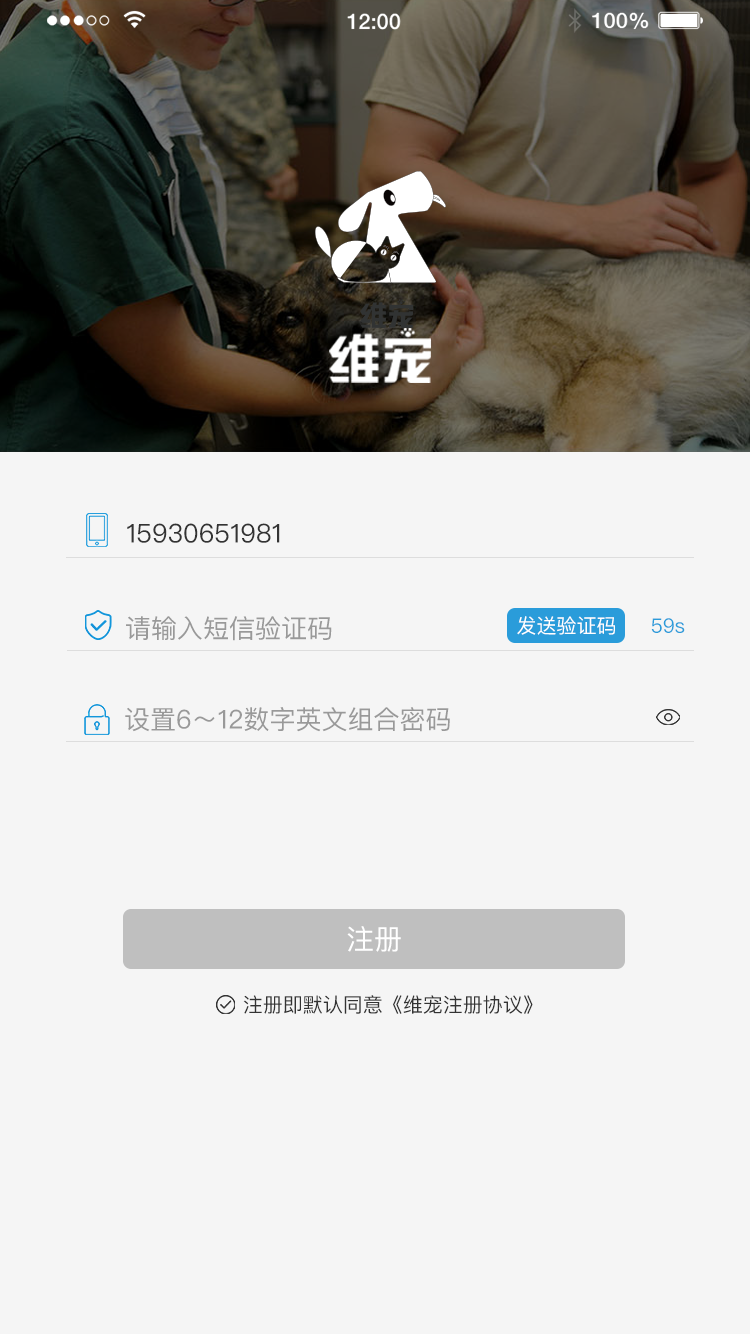
<style>
.page{position:relative;width:750px;height:1334px;background:#f5f5f5}
.page>*{position:absolute;margin:0}
.t1{font:26px "PingFangSC-Regular";color:#333333}
.t2{font:26px "PingFangSC-Regular";color:#999999}
.t3{font:20px "PingFangSC-Regular";color:#ffffff}
.t4{font:20px "PingFangSC-Regular";color:#2a9cda}
.t5{font:28px "PingFangSC-Regular";color:#ffffff}
.t6{font:20px "PingFangSC-Regular";color:#333333}
</style>
<div class="page">
<p class="t1" style="left:127px;top:523px;width:153px;height:20px">15930651981</p>
<p class="t2" style="left:126px;top:616px;width:206px;height:25px">请输入短信验证码</p>
<p class="t3" style="left:517px;top:616px;width:98px;height:19px">发送验证码</p>
<p class="t4" style="left:651px;top:618px;width:34px;height:15px">59s</p>
<p class="t2" style="left:125px;top:707px;width:325px;height:25px">设置6～12数字英文组合密码</p>
<p class="t5" style="left:347px;top:926px;width:54px;height:26px">注册</p>
<p class="t6" style="left:243px;top:995px;width:290px;height:19px">注册即默认同意《维宠注册协议》</p>
</div>
